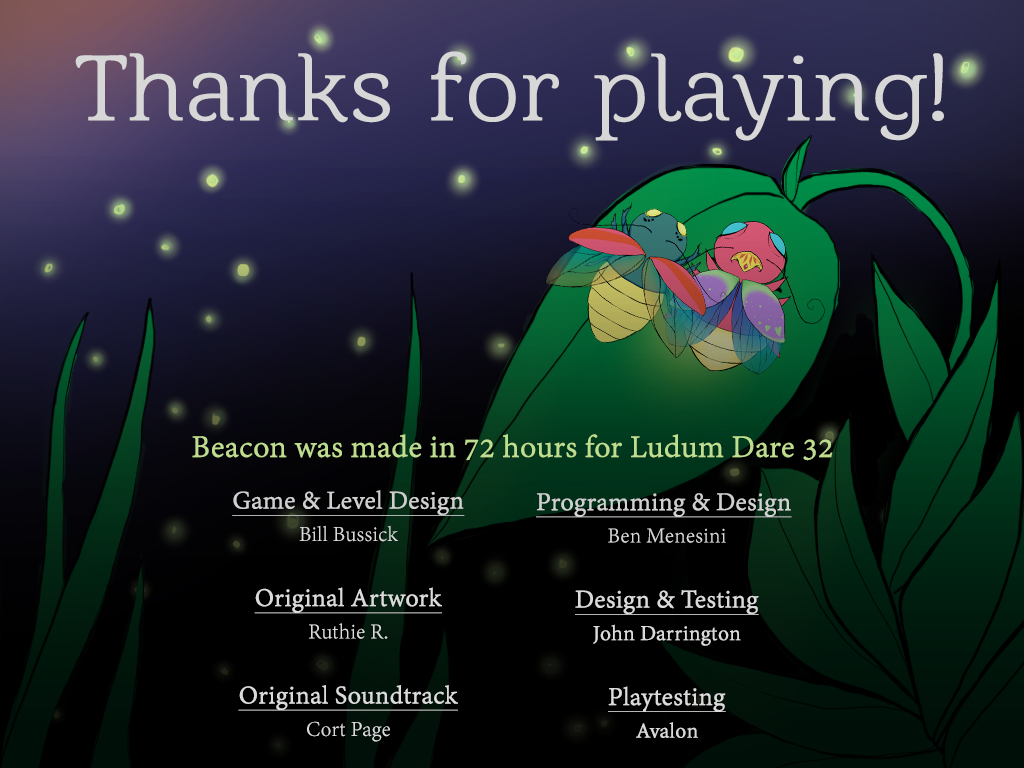
<style>
.page{position:relative;width:1024px;height:768px}
.page>*{position:absolute;margin:0}
.t1{font:34px "AdobeDevanagari-Regular";color:#bfdd8f;font-weight:bold}
.t2{font:27.8px/32.5px "AdobeDevanagari-Regular";color:#dbdbdb;font-weight:bold;text-decoration:underline}
.t3{font:23.2px/32.5px "AdobeDevanagari-Regular";color:#dbdbdb}
.t4{font:23.2px/32.5px "AdobeDevanagari-Regular";color:#dbdbdb;font-weight:bold}
.t5{font:27.8px/32.5px "AdobeDevanagari-Regular";color:#dbdbdb;font-weight:bold}
</style>
<div class="page">
<p class="t1" style="left:192px;top:434px;width:641px;height:27px">Beacon was made in 72 hours for Ludum Dare 32</p>
<p class="t2" style="left:232px;top:490px;width:233px;height:252px;text-align:center">Game &amp; Level Design<br><span class="t3">Bill Bussick<br></span><span class="t4"><br></span>Original Artwork<br><span class="t3">Ruthie R.<br><br></span>Original Soundtrack<br><span class="t3">Cort Page</span></p>
<p class="t2" style="left:536px;top:493px;width:256px;height:245px;text-align:center">Programming &amp; Design<span class="t5"> <br></span><span class="t3">Ben Menesini<br><br></span>Design &amp; Testing<br><span class="t4">John Darrington<br><br></span>Playtesting<br><span class="t4">Avalon</span></p>
</div>
